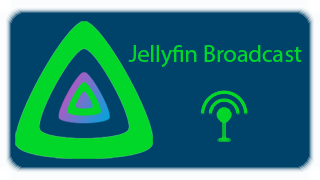
<style>
.page{position:relative;width:320px;height:180px;background:#00436a}
.page>*{position:absolute;margin:0}
.t1{font:24px "MyriadPro-Regular";color:#00d728}
</style>
<div class="page">
<p class="t1" style="left:128px;top:45px;width:174px;height:22px">Jellyfin Broadcast</p>
</div>
